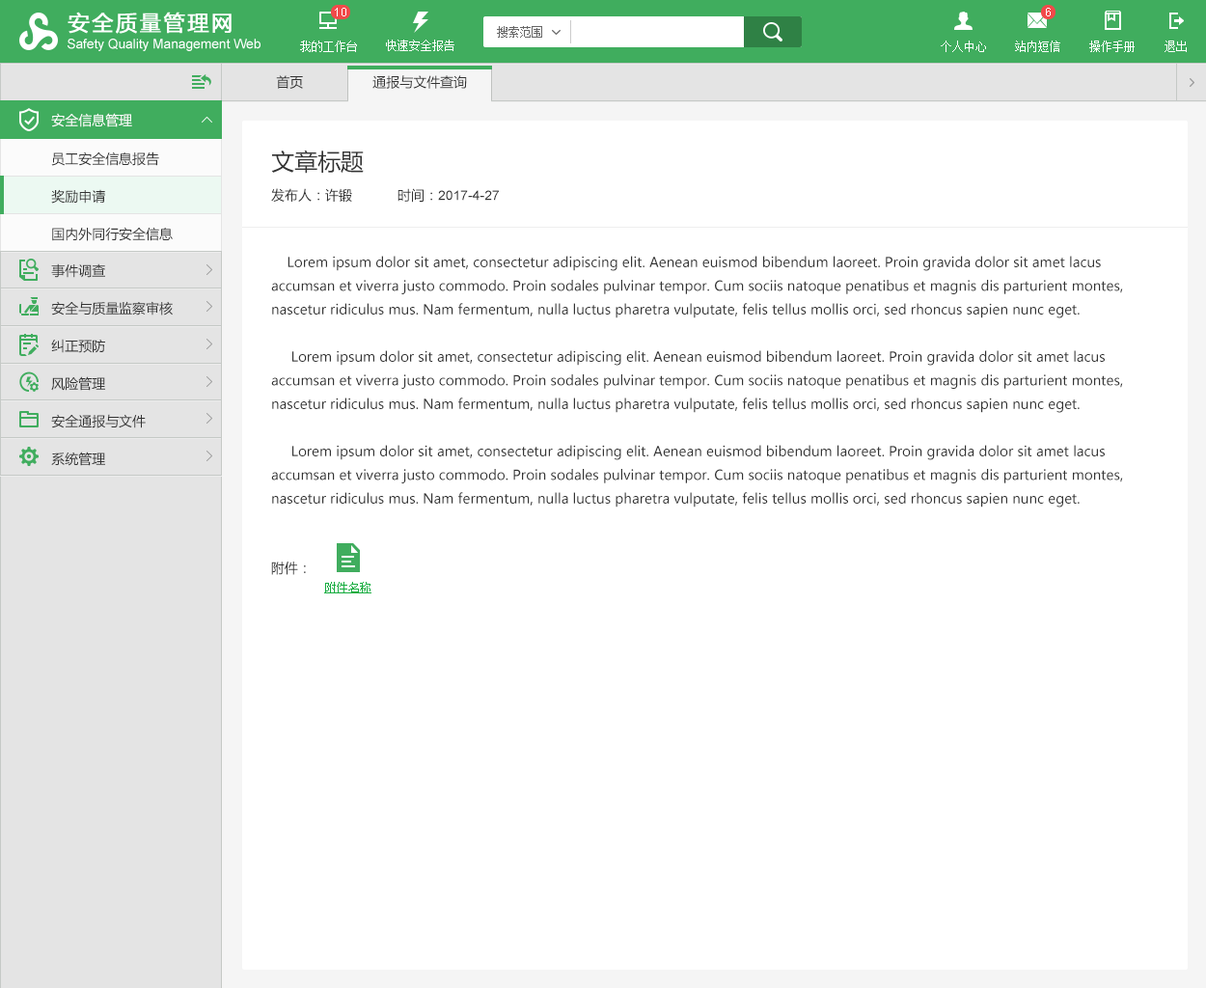
<style>
.page{position:relative;width:1206px;height:988px;background:#ffffff}
.page>*{position:absolute;margin:0}
.t1{font:13.5px "MicrosoftYaHei";color:#333333}
.t2{font:13.5px "MicrosoftYaHei";color:#ffffff}
.t3{font:23.2px "MicrosoftYaHei";color:#333333}
.t4{font:13.5px/37.6px "MicrosoftYaHei";color:#333333}
.t5{font:13.5px "ArialMT";color:#333333}
.t6{font:11.6px "SimSun";color:#16ac3f;text-decoration:underline}
</style>
<div class="page">
<p class="t1" style="left:276px;top:75px;width:27px;height:14px">首页</p>
<p class="t1" style="left:373px;top:75px;width:94px;height:14px">通报与文件查询</p>
<p class="t2" style="left:51px;top:113px;width:81px;height:14px">安全信息管理</p>
<p class="t3" style="left:271px;top:150px;width:93px;height:24px">文章标题</p>
<p class="t4" style="left:51px;top:152px;width:122px;height:89px">员工安全信息报告<br>奖励申请<br>国内外同行安全信息</p>
<p class="t1" style="left:271px;top:188px;width:81px;height:15px">发布人：许锻</p>
<p class="t5" style="left:398px;top:188px;width:101px;height:15px"><span class="t1">时间：</span>2017-4-27</p>
<p class="t1" style="left:271px;top:256px;width:852px;height:252px">Lorem ipsum dolor sit amet, consectetur adipiscing elit. Aenean euismod bibendum laoreet. Proin gravida dolor sit amet lacus accumsan et viverra justo commodo. Proin sodales pulvinar tempor. Cum sociis natoque penatibus et magnis dis parturient montes, nascetur ridiculus mus. Nam fermentum, nulla luctus pharetra vulputate, felis tellus mollis orci, sed rhoncus sapien nunc eget.<br><br>     Lorem ipsum dolor sit amet, consectetur adipiscing elit. Aenean euismod bibendum laoreet. Proin gravida dolor sit amet lacus accumsan et viverra justo commodo. Proin sodales pulvinar tempor. Cum sociis natoque penatibus et magnis dis parturient montes, nascetur ridiculus mus. Nam fermentum, nulla luctus pharetra vulputate, felis tellus mollis orci, sed rhoncus sapien nunc eget.<br><br>     Lorem ipsum dolor sit amet, consectetur adipiscing elit. Aenean euismod bibendum laoreet. Proin gravida dolor sit amet lacus accumsan et viverra justo commodo. Proin sodales pulvinar tempor. Cum sociis natoque penatibus et magnis dis parturient montes, nascetur ridiculus mus. Nam fermentum, nulla luctus pharetra vulputate, felis tellus mollis orci, sed rhoncus sapien nunc eget.</p>
<p class="t4" style="left:51px;top:263px;width:122px;height:203px">事件调查<br>安全与质量监察审核<br>纠正预防<br>风险管理<br>安全通报与文件<br>系统管理</p>
<p class="t1" style="left:271px;top:562px;width:35px;height:13px">附件：</p>
<p class="t6" style="left:324px;top:582px;width:48px;height:12px">附件名称</p>
</div>
